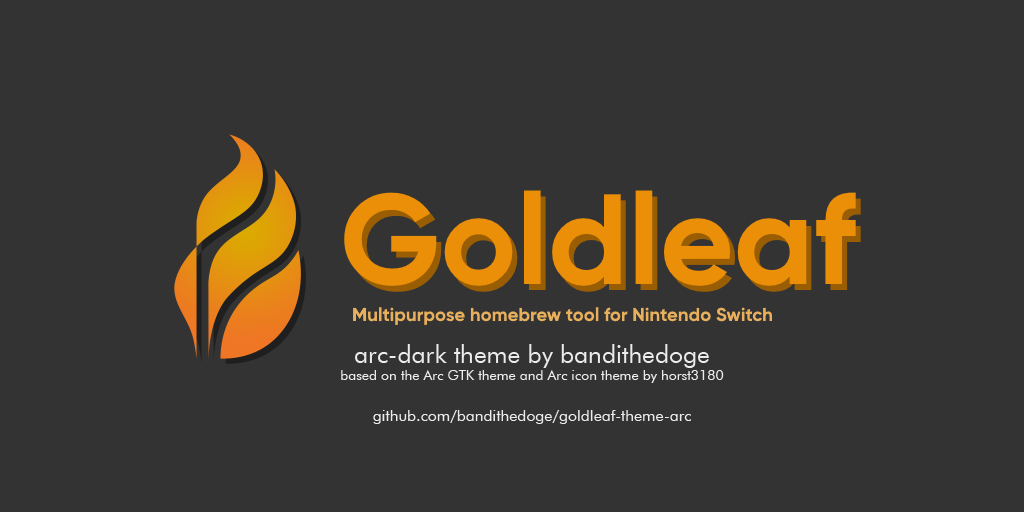
<style>
.page{position:relative;width:1024px;height:512px;background:#333333}
.page>*{position:absolute;margin:0}
.t1{font:13.9px "FuturaBT-Book";color:#ececec}
.t2{font:24.7px "FuturaBT-Book";color:#ececec}
.t3{font:15.8px "FuturaBT-Book";color:#ececec}
</style>
<div class="page">
<p class="t1" style="left:341px;top:344px;width:383px;height:80px;text-align:center"><span class="t2">arc-dark theme by bandithedoge<br></span>based on the Arc GTK theme and Arc icon theme by horst3180<br><br><br><span class="t3">github.com/bandithedoge/goldleaf-theme-arc</span></p>
</div>
